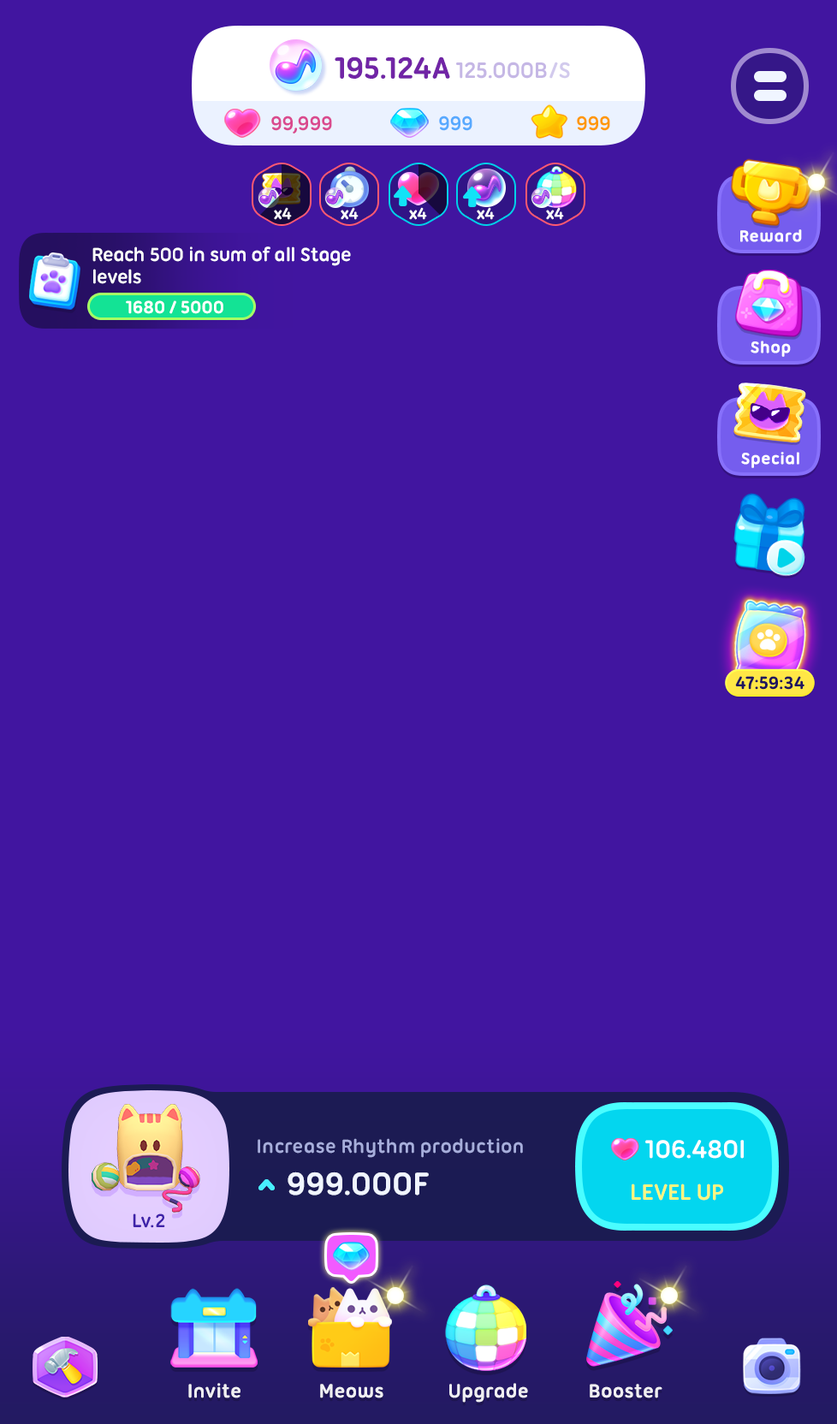
<style>
.page{position:relative;width:837px;height:1424px;background:#4115a0}
.page>*{position:absolute;margin:0}
.t1{font:32.5px "UbuntuTitling-Bold";letter-spacing:-0.025em;color:#7125a6}
.t2{font:24px "UbuntuTitling-Bold";letter-spacing:-0.025em;color:#c5b7e5;text-transform:uppercase}
.t3{font:24px "UbuntuTitling-Bold";letter-spacing:-0.025em;color:#bfb3e5;text-transform:uppercase}
.t4{font:24px "UbuntuTitling-Bold";letter-spacing:-0.025em;color:#bfb3e5}
.t5{font:21.4px "UbuntuTitling-Bold";letter-spacing:-0.025em;color:#da4a8e}
.t6{font:21.4px "UbuntuTitling-Bold";letter-spacing:-0.025em;color:#57a9ff}
.t7{font:21.4px "UbuntuTitling-Bold";letter-spacing:-0.025em;color:#ff9805}
.t8{font:17.1px "UbuntuTitling-Bold";letter-spacing:-0.025em;color:#ffffff}
.t9{font:17.1px "UbuntuTitling-Bold";letter-spacing:-0.025em;color:#ffffff;font-weight:bold}
.t10{font:20.5px/22.3px "UbuntuTitling-Bold";letter-spacing:-0.025em;color:#ffffff}
.t11{font:18.8px "UbuntuTitling-Bold";letter-spacing:-0.025em;color:#ffffff}
.t12{font:19px "UbuntuTitling-Bold";letter-spacing:-0.025em;color:#1f165d}
.t13{font:20.5px "UbuntuTitling-Bold";letter-spacing:-0.025em;color:#a7aedc}
.t14{font:27.4px "UbuntuTitling-Bold";letter-spacing:-0.025em;color:#ffffff}
.t15{font:34.2px "UbuntuTitling-Bold";letter-spacing:-0.025em;color:#f0f5ff;text-transform:uppercase}
.t16{font:24px "UbuntuTitling-Bold";letter-spacing:-0.025em;color:#fff580;text-transform:uppercase}
.t17{font:20.5px "UbuntuTitling-Bold";letter-spacing:-0.025em;color:#3e22a9}
.t18{font:20.5px "UbuntuTitling-Bold";letter-spacing:-0.025em;color:#ffffff}
</style>
<div class="page">
<p class="t1" style="left:335px;top:56px;width:115px;height:23px">195.124A</p>
<p class="t2" style="left:456px;top:62px;width:91px;height:17px">125.000B</p>
<p class="t3" style="left:550px;top:62px;width:8px;height:17px">/</p>
<p class="t4" style="left:559px;top:62px;width:11px;height:17px">S</p>
<p class="t5" style="left:271px;top:116px;width:61px;height:18px">99,999</p>
<p class="t6" style="left:439px;top:116px;width:34px;height:15px">999</p>
<p class="t7" style="left:577px;top:116px;width:33px;height:15px">999</p>
<p class="t8" style="left:274px;top:207px;width:18px;height:13px">x4</p>
<p class="t8" style="left:341px;top:207px;width:18px;height:13px">x4</p>
<p class="t8" style="left:409px;top:207px;width:18px;height:13px">x4</p>
<p class="t8" style="left:477px;top:207px;width:18px;height:13px">x4</p>
<p class="t8" style="left:546px;top:207px;width:18px;height:13px">x4</p>
<p class="t9" style="left:740px;top:229px;width:62px;height:13px">Reward</p>
<p class="t10" style="left:92px;top:247px;width:259px;height:37px">Reach 500 in sum of all Stage<br>levels</p>
<p class="t11" style="left:126px;top:300px;width:97px;height:14px">1680 / 5000</p>
<p class="t9" style="left:751px;top:341px;width:40px;height:16px">Shop</p>
<p class="t9" style="left:741px;top:452px;width:58px;height:16px">Special</p>
<p class="t12" style="left:735px;top:676px;width:70px;height:14px">47:59:34</p>
<p class="t13" style="left:258px;top:1138px;width:265px;height:20px">Increase Rhythm production</p>
<p class="t14" style="left:645px;top:1140px;width:99px;height:19px">106.480I</p>
<p class="t15" style="left:288px;top:1172px;width:141px;height:24px">999.000F</p>
<p class="t16" style="left:632px;top:1184px;width:91px;height:17px">Level up</p>
<p class="t17" style="left:133px;top:1214px;width:32px;height:14px">Lv.2</p>
<p class="t18" style="left:188px;top:1383px;width:53px;height:16px">Invite</p>
<p class="t18" style="left:320px;top:1384px;width:63px;height:15px">Meows</p>
<p class="t18" style="left:449px;top:1383px;width:79px;height:20px">Upgrade</p>
<p class="t18" style="left:590px;top:1384px;width:73px;height:15px">Booster</p>
</div>
